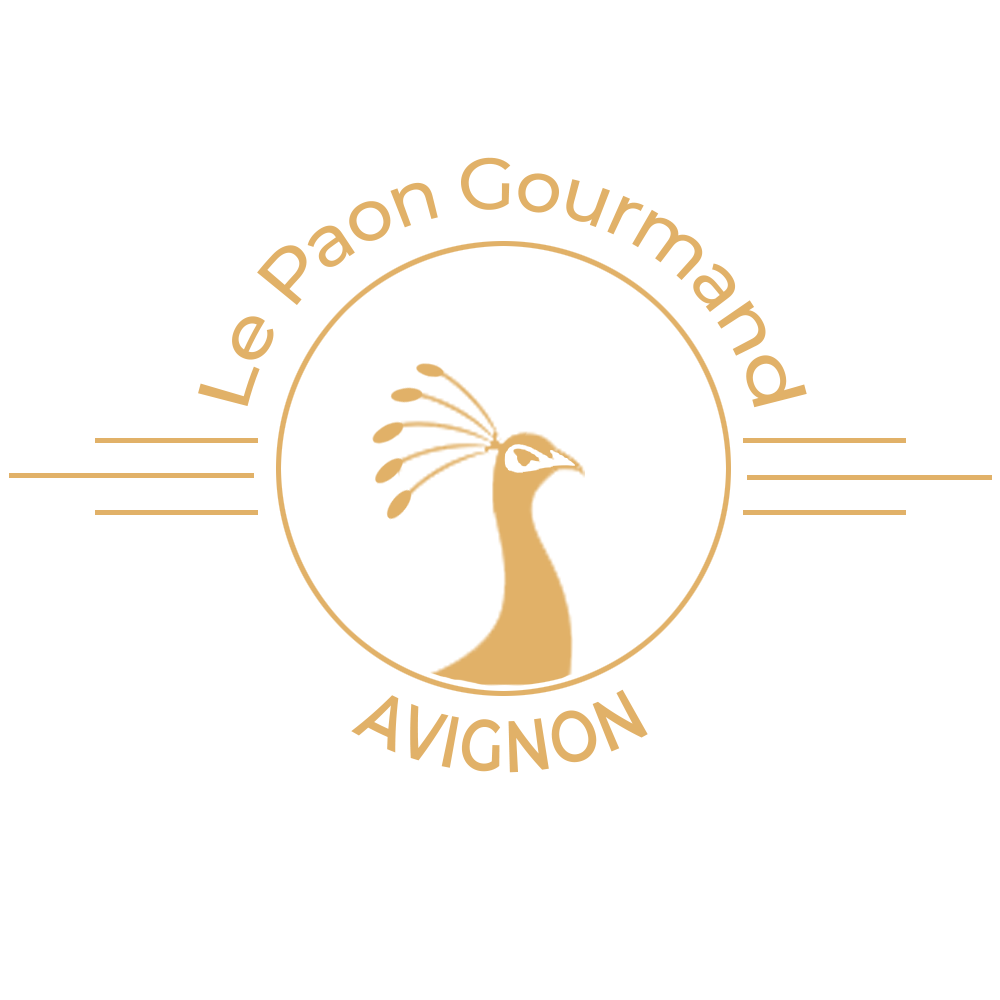
<style>
.page{position:relative;width:1000px;height:1000px;background:#ffffff}
.page>*{position:absolute;margin:0}
.t1{font:72px/30px "Montserrat-Medium";color:#e1b168;scale:0.67 1}
.t2{font:72px "Montserrat-SemiBold";color:#e1b168;scale:0.67 1}
</style>
<div class="page">
<p class="t1" style="left:198px;top:157px;width:609px;height:251px;text-align:center">Le Paon Gourmand</p>
<p class="t2" style="left:351px;top:689px;width:297px;height:84px">AVIGNON</p>
</div>
